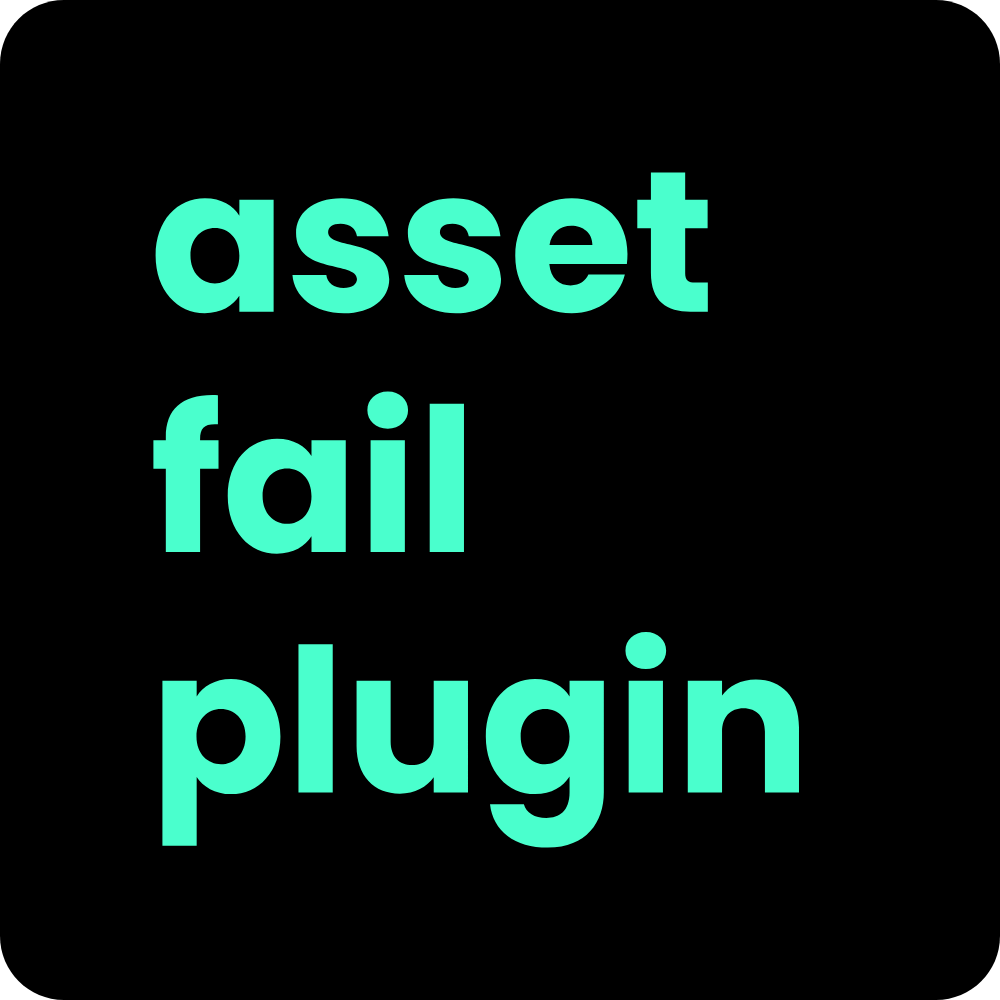
<style>
.page{position:relative;width:1000px;height:1000px;background:#000000}
.page>*{position:absolute;margin:0}
.t1{font:200.4px "Poppins-Bold";color:#4affcd}
</style>
<div class="page">
<p class="t1" style="left:153px;top:172px;width:646px;height:676px">asset<br>fail<br>plugin</p>
</div>
